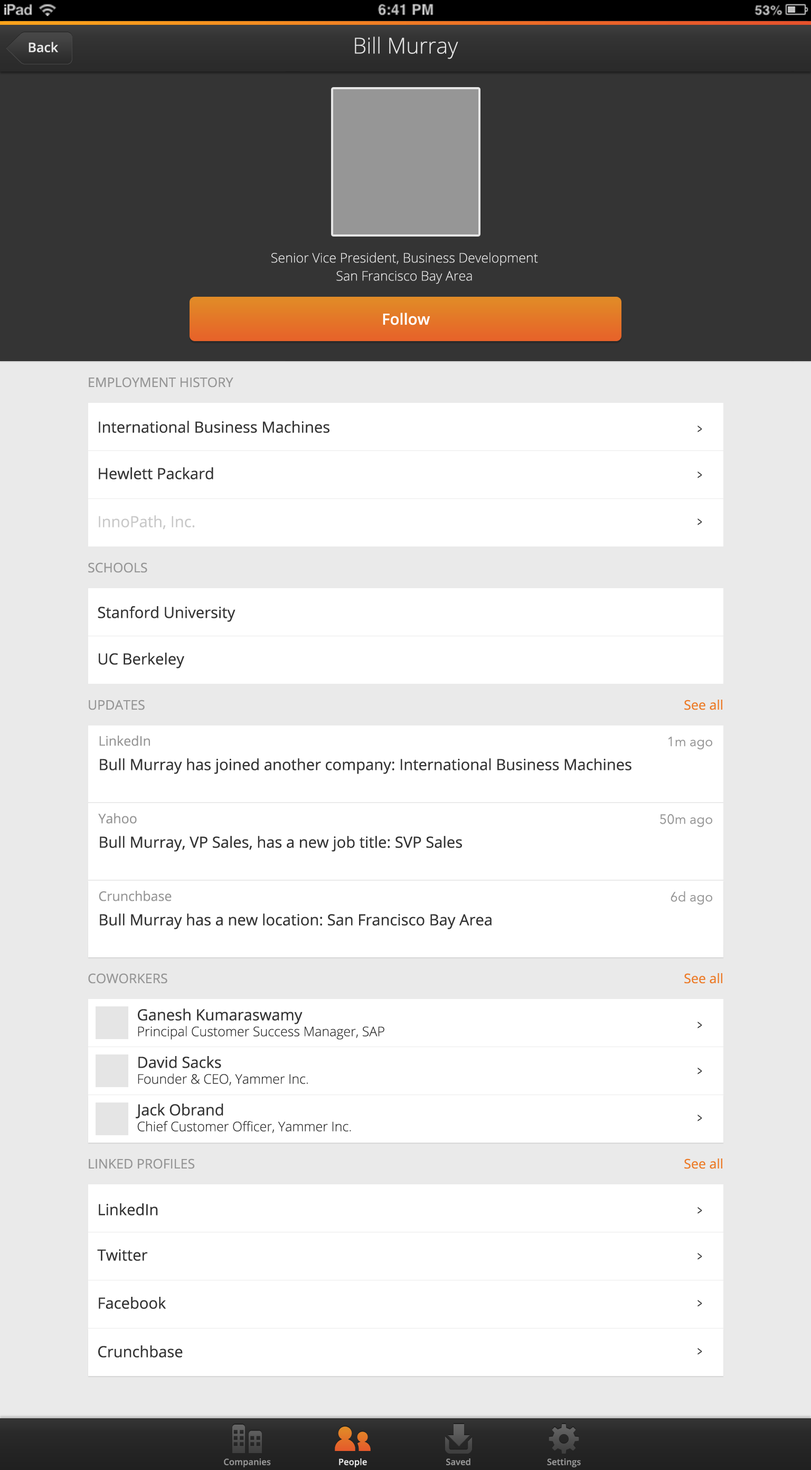
<style>
.page{position:relative;width:811px;height:1470px;background:#ffffff}
.page>*{position:absolute;margin:0}
.t1{font:13.2px "OpenSans-Semibold";color:#e5e5e5}
.t2{font:22px "OpenSans-Light";color:#e5e5e5}
.t3{font:13.2px "OpenSans-Light";color:#e5e5e5}
.t4{font:15.4px "OpenSans-Semibold";color:#ffffff}
.t5{font:13.2px "OpenSans";color:#969696}
.t6{font:15.4px "OpenSans";color:#343434}
.t7{font:13.2px "OpenSans";color:#343434;scale:0.64 1}
.t8{font:15.4px "OpenSans";color:#c8c8c8}
.t9{font:13.2px "OpenSans";color:#ec7a27}
.t10{font:13.2px "AvenirNext-Regular";color:#969696}
.t11{font:13.2px "OpenSans-Light";color:#343434}
.t12{font:8.8px "OpenSans-Semibold";color:#969696}
.t13{font:8.8px "OpenSans-Semibold";color:#e5e5e5}
</style>
<div class="page">
<p class="t1" style="left:29px;top:42px;width:30px;height:10px">Back</p>
<p class="t2" style="left:355px;top:36px;width:103px;height:23px">Bill Murray</p>
<p class="t3" style="left:271px;top:252px;width:267px;height:32px;text-align:center">Senior Vice President, Business Development<br>San Francisco Bay Area</p>
<p class="t4" style="left:383px;top:313px;width:47px;height:12px">Follow</p>
<p class="t5" style="left:89px;top:377px;width:144px;height:11px">EMPLOYMENT HISTORY</p>
<p class="t6" style="left:99px;top:421px;width:231px;height:12px">International Business Machines</p>
<p class="t7" style="left:698px;top:426px;width:4px;height:6px">&gt;</p>
<p class="t6" style="left:99px;top:467px;width:114px;height:12px">Hewlett Packard</p>
<p class="t7" style="left:698px;top:472px;width:4px;height:6px">&gt;</p>
<p class="t8" style="left:99px;top:515px;width:96px;height:15px">InnoPath, Inc.</p>
<p class="t7" style="left:698px;top:519px;width:4px;height:6px">&gt;</p>
<p class="t5" style="left:88px;top:562px;width:59px;height:11px">SCHOOLS</p>
<p class="t6" style="left:98px;top:606px;width:138px;height:16px">Stanford University</p>
<p class="t6" style="left:99px;top:653px;width:85px;height:16px">UC Berkeley</p>
<p class="t5" style="left:89px;top:700px;width:56px;height:10px">UPDATES</p>
<p class="t9" style="left:684px;top:700px;width:38px;height:10px">See all</p>
<p class="t6" style="left:99px;top:736px;width:533px;height:38px"><span class="t5">LinkedIn<br></span>Bull Murray has joined another company: International Business Machines</p>
<p class="t10" style="left:668px;top:737px;width:44px;height:13px">1m ago</p>
<p class="t6" style="left:98px;top:813px;width:364px;height:39px"><span class="t5">Yahoo<br></span>Bull Murray, VP Sales, has a new job title: SVP Sales</p>
<p class="t10" style="left:660px;top:814px;width:52px;height:13px">50m ago</p>
<p class="t6" style="left:99px;top:891px;width:393px;height:38px"><span class="t5">Crunchbase<br></span>Bull Murray has a new location: San Francisco Bay Area</p>
<p class="t10" style="left:671px;top:891px;width:41px;height:14px">6d ago</p>
<p class="t5" style="left:88px;top:973px;width:79px;height:11px">COWORKERS</p>
<p class="t9" style="left:684px;top:973px;width:38px;height:11px">See all</p>
<p class="t11" style="left:138px;top:1009px;width:246px;height:31px"><span class="t6">Ganesh Kumaraswamy<br></span>Principal Customer Success Manager, SAP USA</p>
<p class="t7" style="left:698px;top:1022px;width:4px;height:7px">&gt;</p>
<p class="t11" style="left:138px;top:1056px;width:170px;height:30px"><span class="t6">David Sacks<br></span>Founder &amp; CEO, Yammer Inc.</p>
<p class="t7" style="left:698px;top:1068px;width:4px;height:7px">&gt;</p>
<p class="t11" style="left:136px;top:1104px;width:215px;height:29px"><span class="t6">Jack Obrand<br></span>Chief Customer Officer, Yammer Inc.</p>
<p class="t7" style="left:698px;top:1115px;width:4px;height:7px">&gt;</p>
<p class="t5" style="left:89px;top:1159px;width:106px;height:10px">LINKED PROFILES</p>
<p class="t9" style="left:684px;top:1159px;width:38px;height:10px">See all</p>
<p class="t6" style="left:99px;top:1203px;width:59px;height:13px">LinkedIn</p>
<p class="t7" style="left:698px;top:1207px;width:4px;height:7px">&gt;</p>
<p class="t6" style="left:97px;top:1249px;width:51px;height:12px">Twitter</p>
<p class="t7" style="left:698px;top:1253px;width:4px;height:7px">&gt;</p>
<p class="t6" style="left:99px;top:1297px;width:67px;height:12px">Facebook</p>
<p class="t7" style="left:698px;top:1300px;width:4px;height:7px">&gt;</p>
<p class="t6" style="left:98px;top:1346px;width:85px;height:12px">Crunchbase</p>
<p class="t7" style="left:698px;top:1348px;width:4px;height:7px">&gt;</p>
<p class="t12" style="left:224px;top:1459px;width:47px;height:8px">Companies</p>
<p class="t13" style="left:339px;top:1459px;width:28px;height:8px">People</p>
<p class="t12" style="left:446px;top:1459px;width:25px;height:6px">Saved</p>
<p class="t12" style="left:547px;top:1459px;width:34px;height:8px">Settings</p>
</div>
